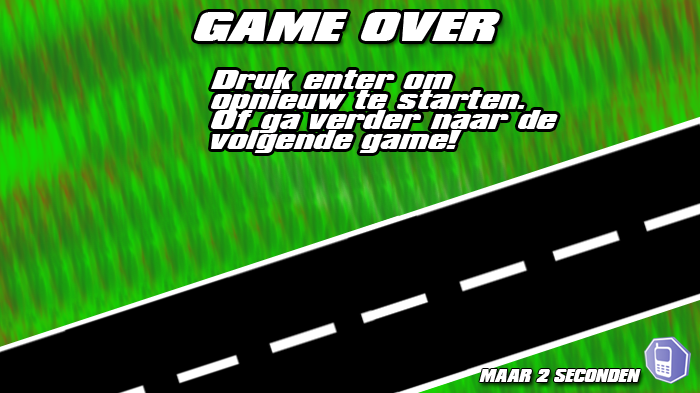
<style>
.page{position:relative;width:700px;height:393px;background:#000000}
.page>*{position:absolute;margin:0}
.t1{font:36px "LHFConvectaBASE";color:#ffffff}
.t2{font:24px/20px "LHFConvectaBASE";color:#ffffff}
.t3{font:16.3px "LHFConvectaBASE";color:#ffffff;scale:0.7 1}
</style>
<div class="page">
<p class="t1" style="left:194px;top:12px;width:306px;height:29px">GAME OVER</p>
<p class="t2" style="left:211px;top:70px;width:347px;height:83px">Druk enter om <br>opnieuw te starten.<br>Of ga verder naar de <br>volgende game!</p>
<p class="t3" style="left:479px;top:369px;width:162px;height:13px">MAAR 2 SECONDEN</p>
</div>
